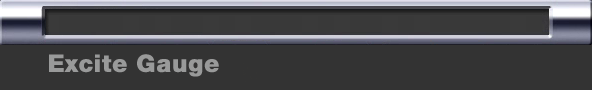
<style>
.page{position:relative;width:592px;height:90px;background:#333333}
.page>*{position:absolute;margin:0}
.t1{font:24px "HelveticaNeueLTStd-Hv";letter-spacing:0.025em;color:#999a9a;font-weight:bold}
.t2{font:24px "HelveticaNeueLTStd-Hv";letter-spacing:0.01em;color:#999a9a;font-weight:bold}
.t3{font:24px "HelveticaNeueLTStd-Hv";letter-spacing:0.015em;color:#999a9a;font-weight:bold}
</style>
<div class="page">
<p class="t1" style="left:49px;top:54px;width:170px;height:23px"><span class="t2">Exc</span><span class="t3">ite </span>Gauge</p>
</div>
